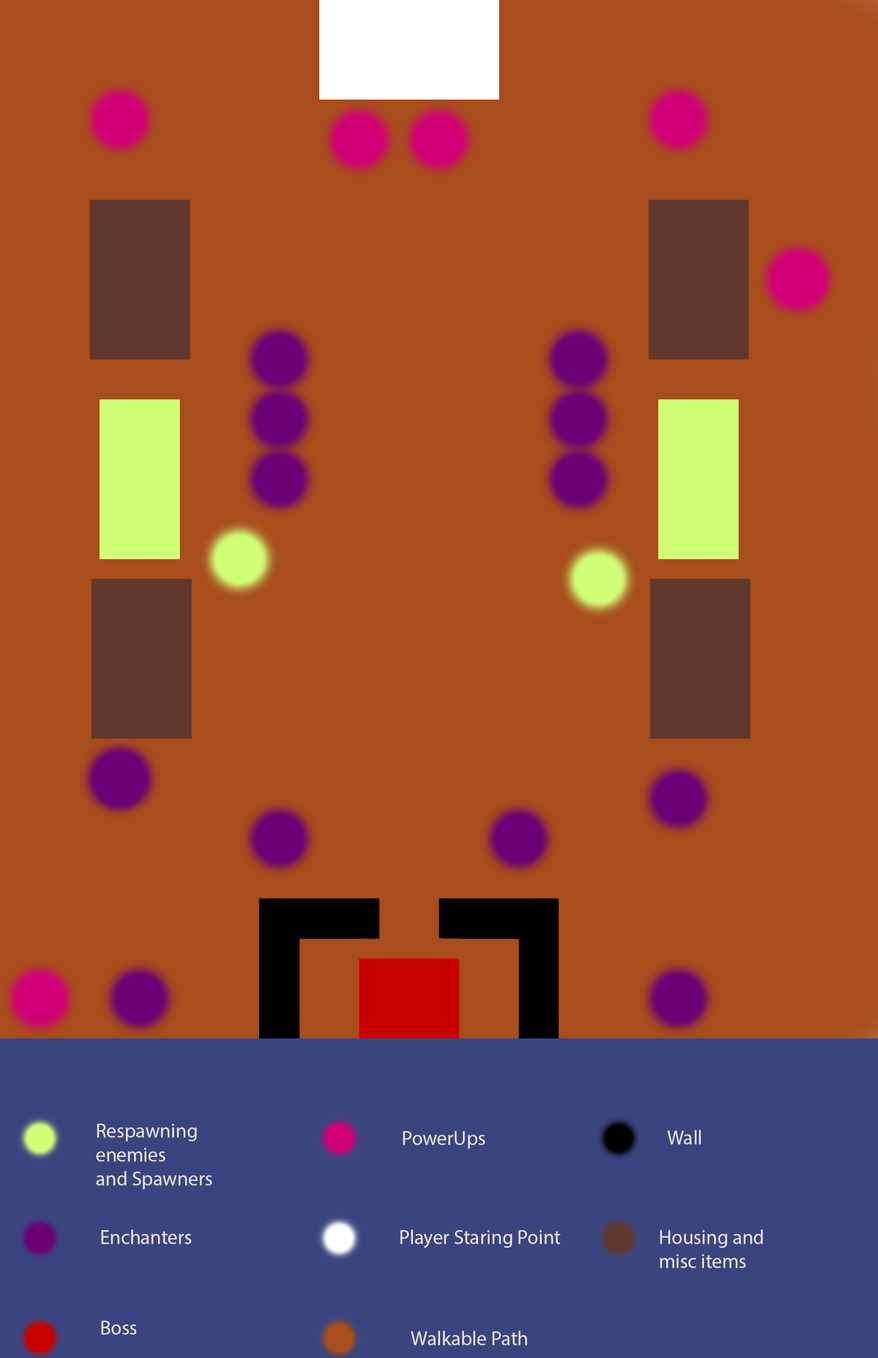
<style>
.page{position:relative;width:878px;height:1358px;background:#a84d1b}
.page>*{position:absolute;margin:0}
.t1{font:20px "MyriadPro-Regular";color:#f0e2de}
</style>
<div class="page">
<p class="t1" style="left:96px;top:1123px;width:116px;height:66px">Respawning<br>enemies<br>and Spawners</p>
<p class="t1" style="left:403px;top:1131px;width:83px;height:17px">PowerUps</p>
<p class="t1" style="left:668px;top:1130px;width:33px;height:14px">Wall</p>
<p class="t1" style="left:101px;top:1229px;width:91px;height:15px">Enchanters</p>
<p class="t1" style="left:400px;top:1229px;width:161px;height:19px">Player Staring Point</p>
<p class="t1" style="left:660px;top:1229px;width:103px;height:39px">Housing and <br>misc items</p>
<p class="t1" style="left:101px;top:1320px;width:36px;height:14px">Boss</p>
<p class="t1" style="left:411px;top:1330px;width:117px;height:15px">Walkable Path</p>
</div>
